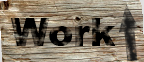
<style>
.page{position:relative;width:144px;height:62px}
.page>*{position:absolute;margin:0}
.t1{font:37.5px "Arial-Black"}
</style>
<div class="page">
<p class="t1" style="left:11px;top:18px;width:105px;height:28px">Work</p>
</div>
